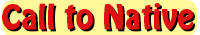
<style>
.page{position:relative;width:200px;height:35px;background:#fff799}
.page>*{position:absolute;margin:0}
.t1{font:30px "HoboStd";color:#dd1111;font-weight:bold}
.t2{font:30px "HoboStd";font-weight:bold}
</style>
<div class="page">
<p class="t1" style="left:2px;top:3px;width:191px;height:27px">Call to Native</p>
<p class="t2" style="left:4px;top:5px;width:191px;height:27px">Call to Native</p>
</div>
